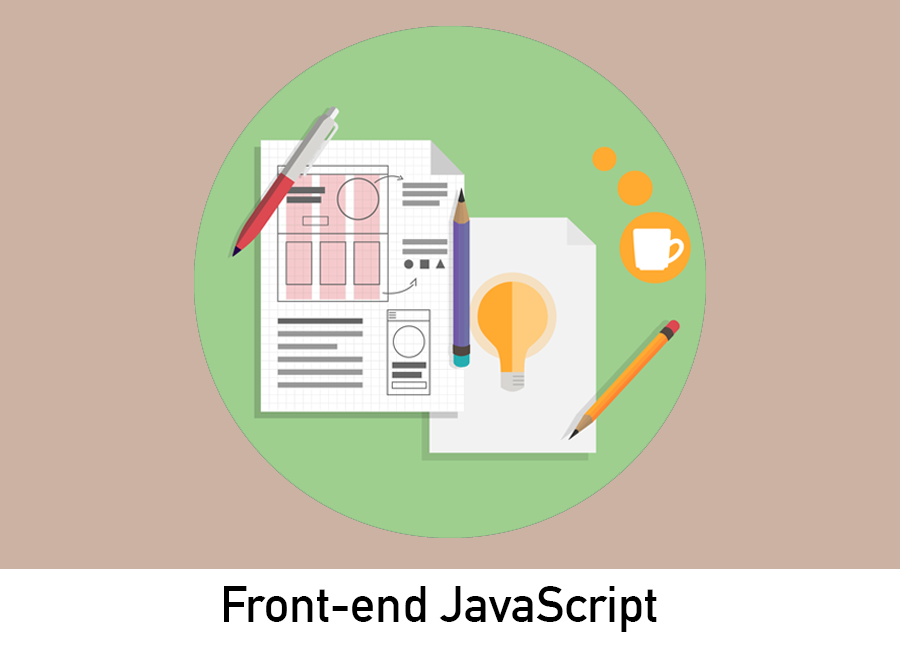
<style>
.page{position:relative;width:900px;height:650px;background:#ccb2a3}
.page>*{position:absolute;margin:0}
.t1{font:50px "DINAlternate-Bold";color:#000000}
</style>
<div class="page">
<p class="t1" style="left:224px;top:586px;width:433px;height:46px">Front-end JavaScript</p>
</div>
